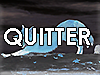
<style>
.page{position:relative;width:100px;height:75px}
.page>*{position:absolute;margin:0}
.t1{font:24px "CenturyGothic-Bold";color:#ffffff}
</style>
<div class="page">
<p class="t1" style="left:4px;top:28px;width:86px;height:18px">QUITTER</p>
</div>
